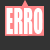
<style>
.page{position:relative;width:50px;height:50px;background:#333333}
.page>*{position:absolute;margin:0}
.t1{font:32.9px "Impact";color:#ffffff;scale:0.56 1}
</style>
<div class="page">
<p class="t1" style="left:6px;top:8px;width:37px;height:26px">ERRO</p>
</div>
